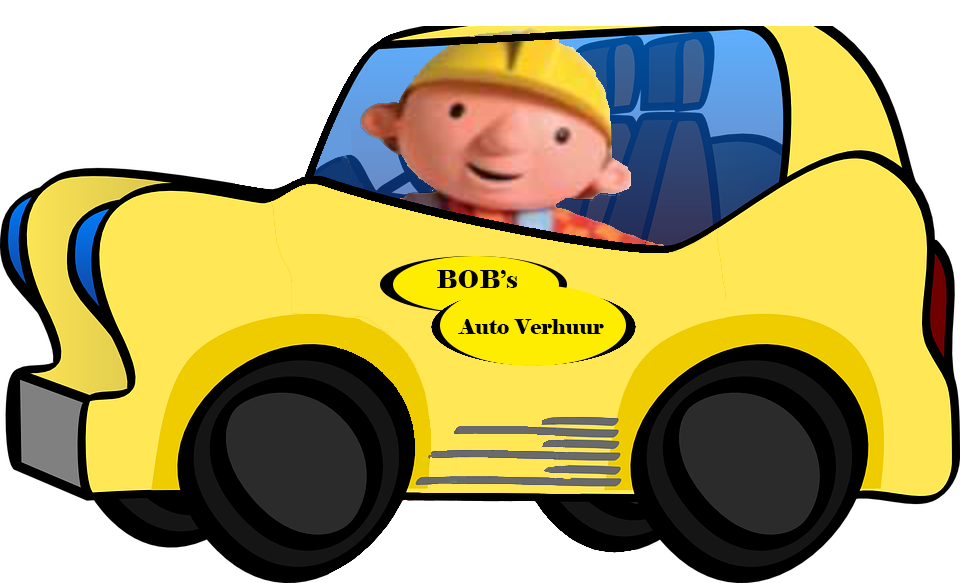
<style>
.page{position:relative;width:960px;height:583px;background:#ffffff}
.page>*{position:absolute;margin:0}
.t1{font:24px "Elephant-Regular";color:#000000}
.t2{font:21px "Elephant-Regular";color:#000000}
</style>
<div class="page">
<p class="t1" style="left:437px;top:270px;width:81px;height:18px">BOB’s</p>
<p class="t2" style="left:458px;top:319px;width:146px;height:15px">Auto Verhuur</p>
</div>
